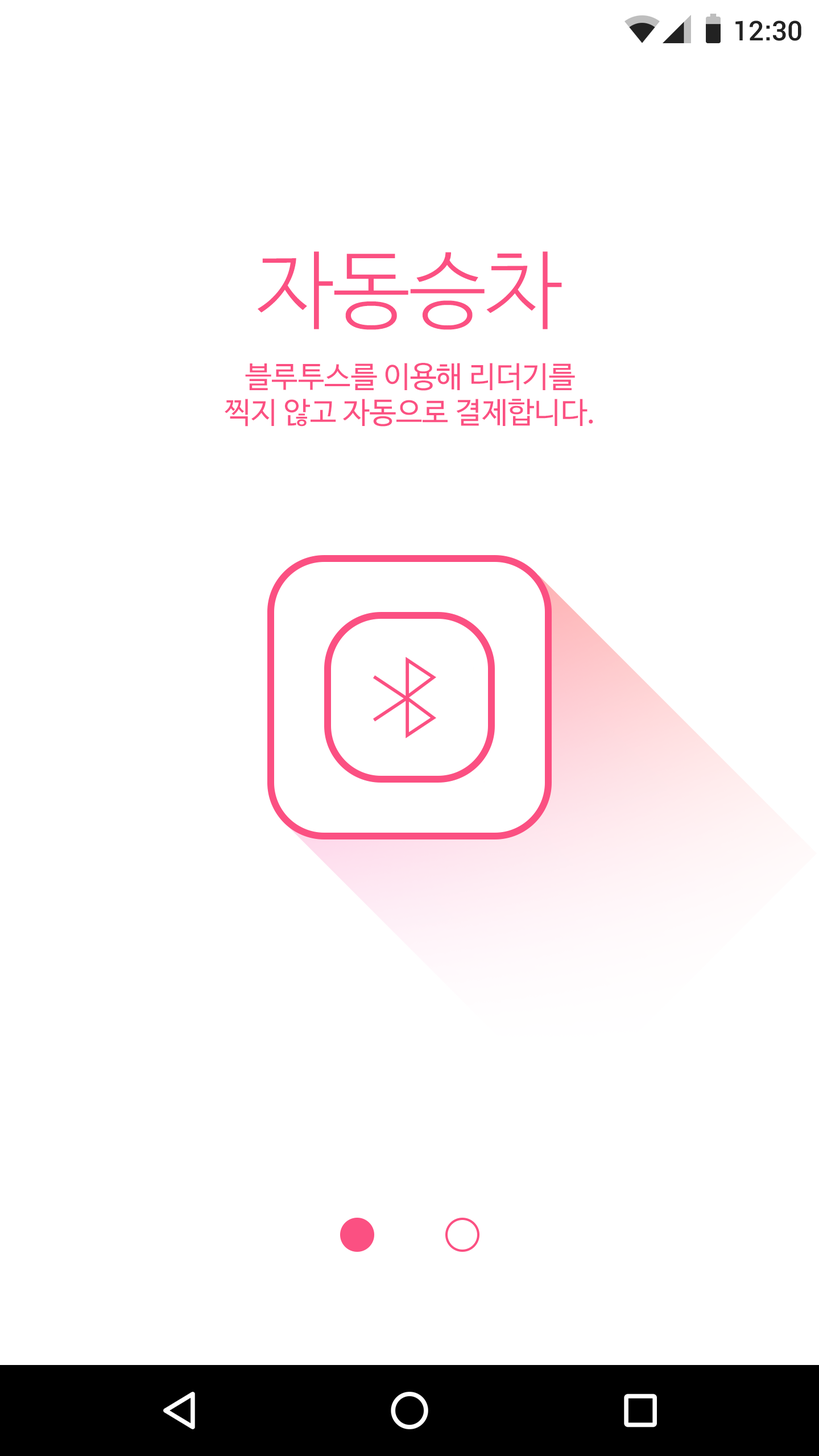
<style>
.page{position:relative;width:819px;height:1456px;background:#ffffff}
.page>*{position:absolute;margin:0}
.t1{font:27.3px "Roboto-Medium";color:#222222}
.t2{font:85.3px "NanumBarunGothicLight";color:#fb5082}
.t3{font:29.6px "NanumBarunGothic";color:#fb5082}
</style>
<div class="page">
<p class="t1" style="left:735px;top:20px;width:66px;height:21px">12:30</p>
<p class="t2" style="left:258px;top:251px;width:304px;height:79px">자동승차</p>
<p class="t3" style="left:225px;top:363px;width:368px;height:64px;text-align:center">블루투스를 이용해 리더기를<br>찍지 않고 자동으로 결제합니다.</p>
</div>
